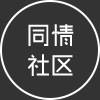
<style>
.page{position:relative;width:100px;height:100px;background:#333333}
.page>*{position:absolute;margin:0}
.t1{font:24px "MFShangHei_Noncommercial-Regular";color:#ffffff}
</style>
<div class="page">
<p class="t1" style="left:28px;top:24px;width:46px;height:22px">同情</p>
<p class="t1" style="left:27px;top:54px;width:46px;height:22px">社区</p>
</div>
